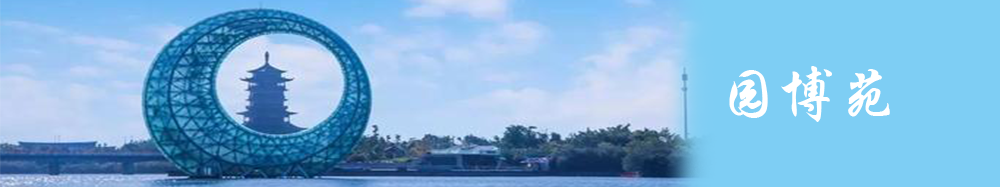
<style>
.page{position:relative;width:1000px;height:187px;background:#7ecef4}
.page>*{position:absolute;margin:0}
.t1{font:60px "STXingkai";color:#ffffff}
</style>
<div class="page">
<p class="t1" style="left:729px;top:66px;width:161px;height:56px">园博苑</p>
</div>
